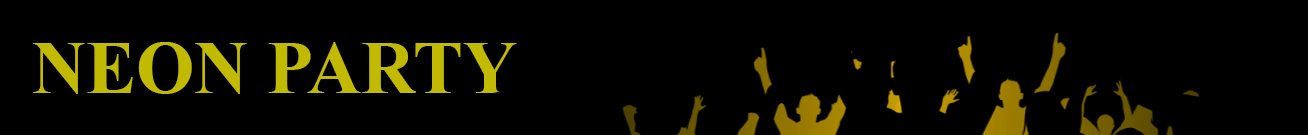
<style>
.page{position:relative;width:1308px;height:135px;background:#000000}
.page>*{position:absolute;margin:0}
.t1{font:75px "TimesNewRomanPS-BoldMT";color:#c1ba00}
</style>
<div class="page">
<p class="t1" style="left:33px;top:42px;width:484px;height:52px">NEON PARTY</p>
</div>
